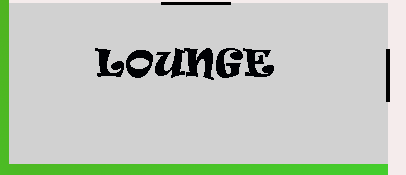
<style>
.page{position:relative;width:406px;height:175px;background:#d1d1d1}
.page>*{position:absolute;margin:0}
.t1{font:36px "Ravie";color:#000104}
</style>
<div class="page">
<p class="t1" style="left:95px;top:48px;width:179px;height:32px">LOUNGE</p>
</div>
